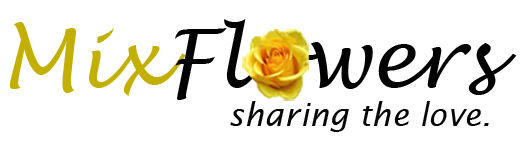
<style>
.page{position:relative;width:531px;height:150px;background:#ffffff}
.page>*{position:absolute;margin:0}
.t1{font:81.1px "LucidaHandwriting-Italic";color:#000000}
.t2{font:81.1px "LucidaHandwriting-Italic";color:#c2af00}
.t3{font:32.4px "LucidaSans-Italic";color:#070707}
</style>
<div class="page">
<p class="t1" style="left:9px;top:19px;width:508px;height:81px"><span class="t2">Mix</span>Flowers</p>
<p class="t3" style="left:230px;top:101px;width:259px;height:31px">sharing the love.</p>
</div>
